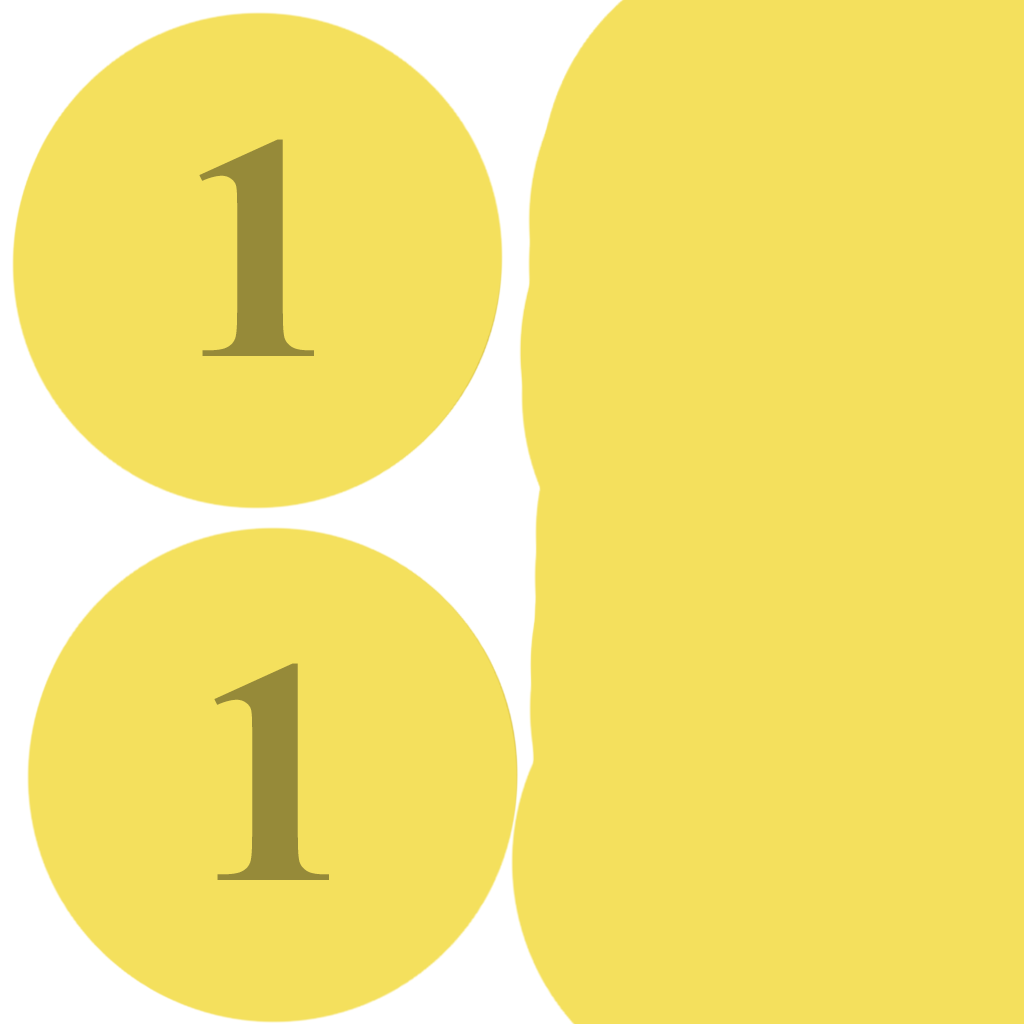
<style>
.page{position:relative;width:1024px;height:1024px;background:#f4e05d}
.page>*{position:absolute;margin:0}
.t1{font:320px "TimesNewRomanPS-BoldMT";letter-spacing:-0.02em;color:#968a39}
.t2{font:24px "TimesNewRomanPS-BoldMT";letter-spacing:-0.02em;color:#968a39}
</style>
<div class="page">
<p class="t1" style="left:199px;top:139px;width:115px;height:217px"><span class="t2"><br><br><br><br><br><br><br><br><br><br><br><br><br><br><br><br><br><br><br><br><br><br><br><br><br><br><br><br><br><br><br><br><br><br></span><br><br><br><br><br>1</p>
<p class="t1" style="left:214px;top:663px;width:115px;height:217px"><span class="t2"><br><br><br><br><br><br><br><br><br><br><br><br><br><br><br><br><br><br><br><br><br><br><br><br><br><br><br><br><br><br><br><br><br><br></span><br><br><br><br><br>1</p>
</div>
